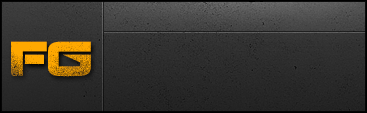
<style>
.page{position:relative;width:367px;height:113px}
.page>*{position:absolute;margin:0}
.t1{font:48px "Coalition";letter-spacing:-0.02em;color:#ffa800}
</style>
<div class="page">
<p class="t1" style="left:11px;top:41px;width:80px;height:36px">FG</p>
</div>
